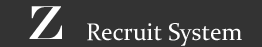
<style>
.page{position:relative;width:262px;height:47px;background:#333333}
.page>*{position:absolute;margin:0}
.t1{font:48px "EngraversMT";color:#ffffff}
.t2{font:24px "Constantia";color:#ffffff}
</style>
<div class="page">
<p class="t1" style="left:29px;top:6px;width:33px;height:33px">Z</p>
<p class="t2" style="left:87px;top:23px;width:155px;height:23px">Recruit System</p>
</div>
